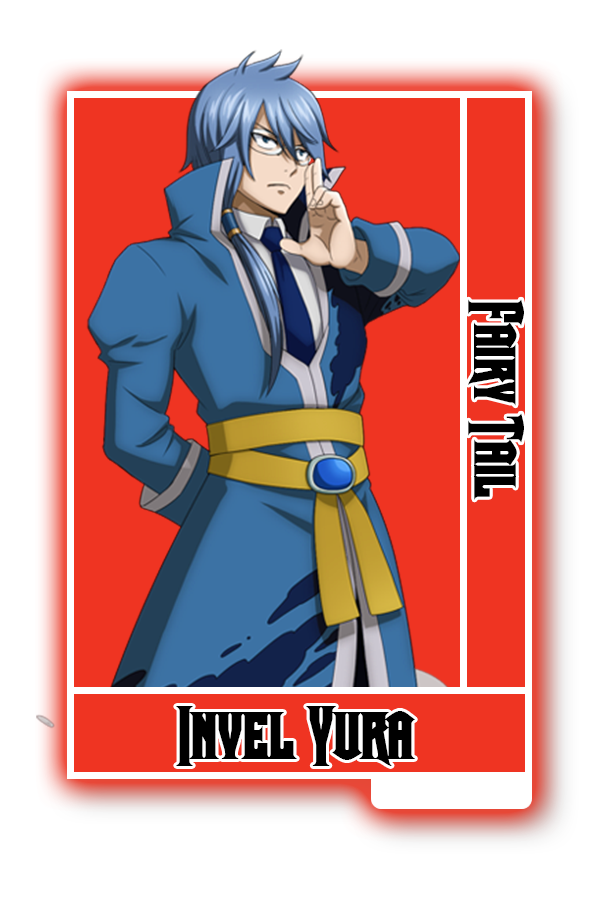
<style>
.page{position:relative;width:600px;height:900px;background:#ffffff}
.page>*{position:absolute;margin:0}
.t1{font:61.5px "Crown-Title";color:#000000}
.t2{font:70.1px "Crown-Title";color:#000000}
</style>
<div class="page">
<p class="t1" style="left:468px;top:299px;width:56px;height:201px;rotate:90deg">Fairy Tail</p>
<p class="t2" style="left:176px;top:706px;width:239px;height:60px">Invel Yura</p>
</div>
